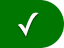
<style>
.page{position:relative;width:64px;height:48px;background:#007700}
.page>*{position:absolute;margin:0}
.t1{font:32px "LucidaGrande";color:#ffffff}
</style>
<div class="page">
<p class="t1" style="left:18px;top:12px;width:21px;height:25px">✓</p>
</div>
